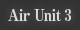
<style>
.page{position:relative;width:80px;height:30px;background:#333333}
.page>*{position:absolute;margin:0}
.t1{font:16px "RyuminPro-ExBold";letter-spacing:-0.04em;color:#dfdfdf;scale:0.9 1}
</style>
<div class="page">
<p class="t1" style="left:8px;top:9px;width:63px;height:12px">Air Unit 3</p>
</div>
